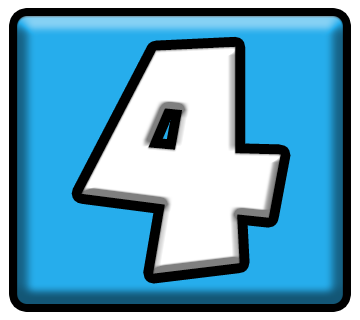
<style>
.page{position:relative;width:360px;height:320px;background:#26adec}
.page>*{position:absolute;margin:0}
.t1{font:294.4px "Funhouse";color:#ffffff}
</style>
<div class="page">
<p class="t1" style="left:81px;top:46px;width:200px;height:228px">4</p>
</div>
